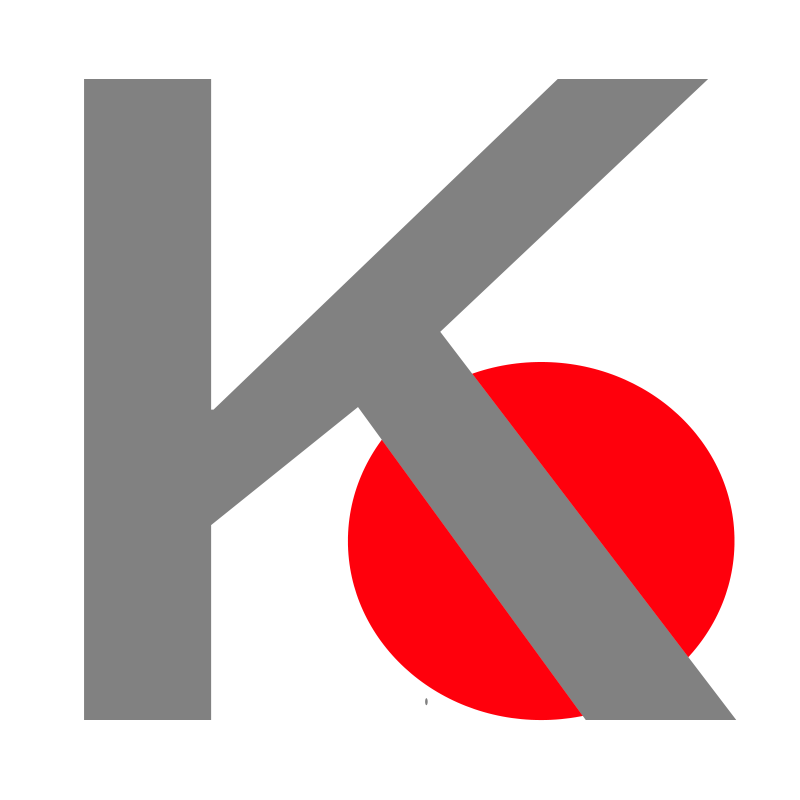
<style>
.page{position:relative;width:800px;height:800px;background:#ffffff}
.page>*{position:absolute;margin:0}
.t1{font:900.6px "DINAlternate-Bold";color:#818181;scale:1.34 1}
</style>
<div class="page">
<p class="t1" style="left:84px;top:79px;width:653px;height:641px">K</p>
</div>
